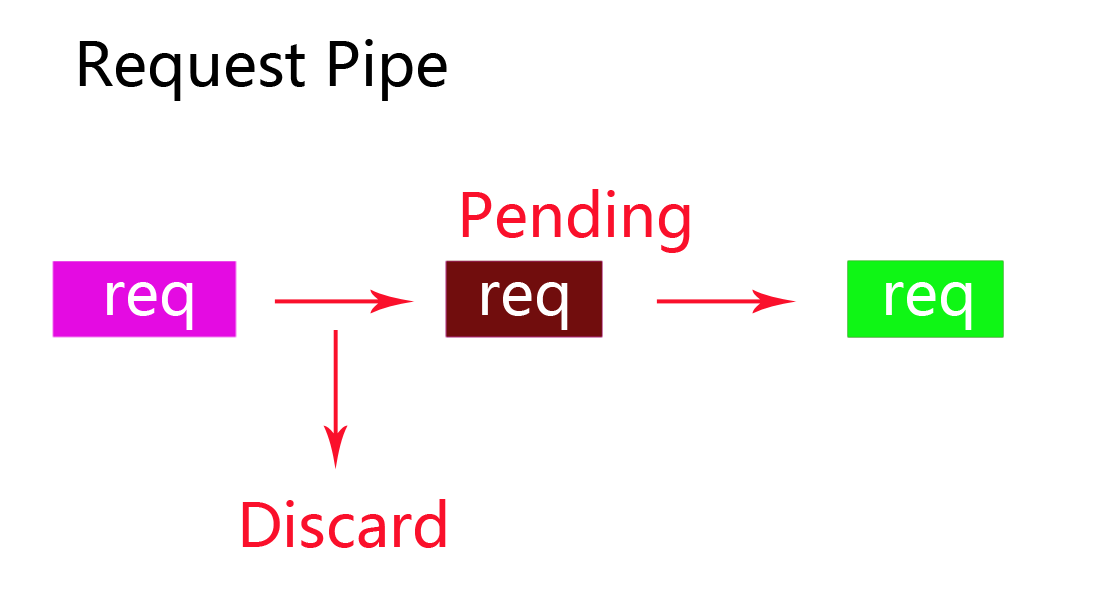
<style>
.page{position:relative;width:1102px;height:603px;background:#ffffff}
.page>*{position:absolute;margin:0}
.t1{font:60px "MicrosoftYaHei";color:#000000}
.t2{font:60px "MicrosoftYaHei";color:#fa102b}
.t3{font:60px "MicrosoftYaHei";color:#ffffff}
</style>
<div class="page">
<p class="t1" style="left:79px;top:39px;width:368px;height:62px">Request Pipe</p>
<p class="t2" style="left:462px;top:189px;width:228px;height:64px">Pending</p>
<p class="t3" style="left:107px;top:282px;width:86px;height:48px">req</p>
<p class="t3" style="left:482px;top:282px;width:86px;height:48px">req</p>
<p class="t3" style="left:886px;top:282px;width:86px;height:48px">req</p>
<p class="t2" style="left:242px;top:499px;width:204px;height:49px">Discard</p>
</div>
